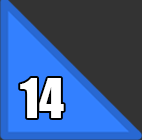
<style>
.page{position:relative;width:142px;height:140px;background:#333333}
.page>*{position:absolute;margin:0}
.t1{font:50px "Impact";color:#ffffff}
</style>
<div class="page">
<p class="t1" style="left:20px;top:78px;width:44px;height:40px">14</p>
</div>
